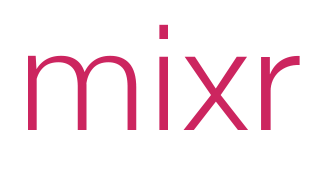
<style>
.page{position:relative;width:320px;height:180px;background:#ffffff}
.page>*{position:absolute;margin:0}
.t1{font:138px "Roboto-Light";color:#cc255f;scale:1.07 1}
.t2{font:142px "HelveticaNeue-Light";color:#cc255f;scale:1.07 1}
</style>
<div class="page">
<p class="t1" style="left:28px;top:24px;width:272px;height:106px">mix<span class="t2">r</span></p>
</div>
